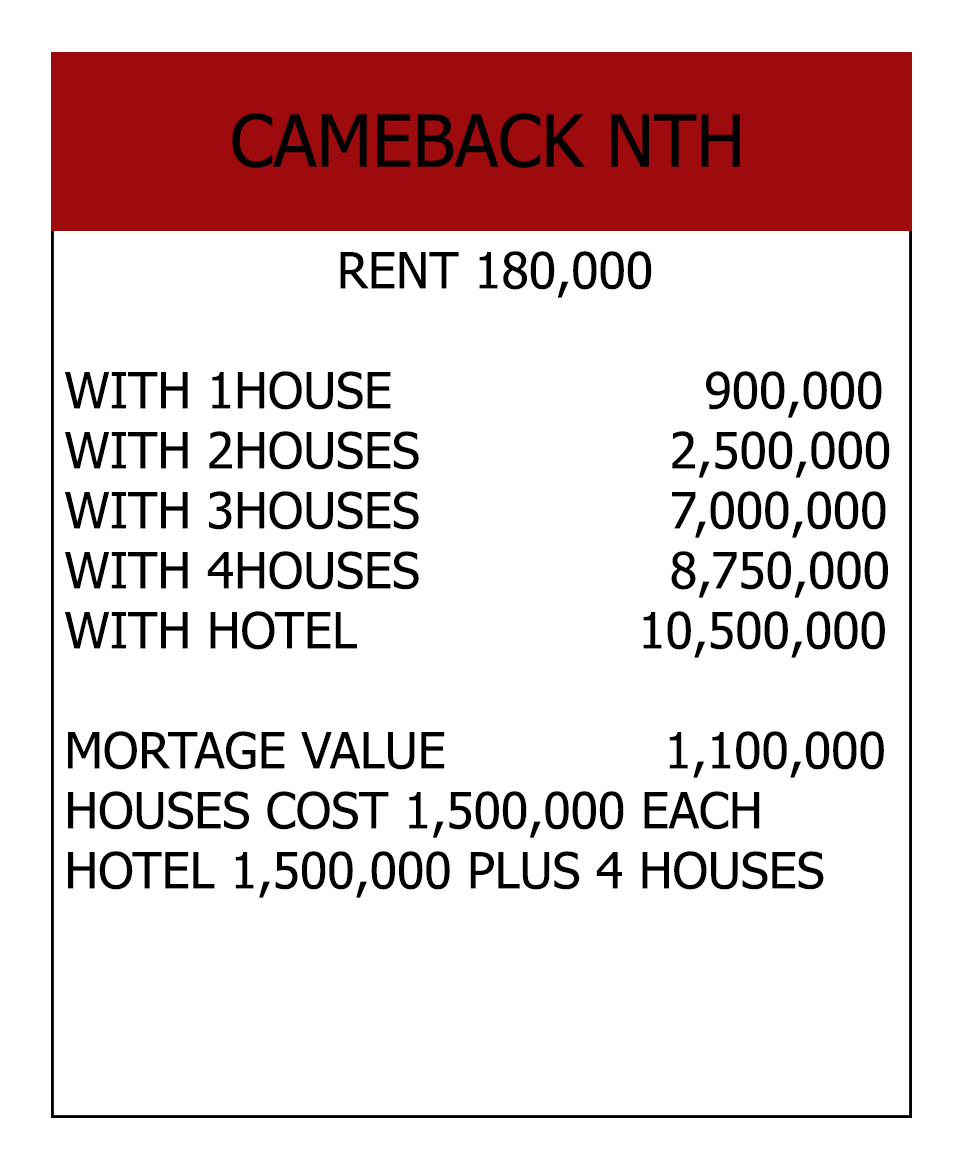
<style>
.page{position:relative;width:966px;height:1164px;background:#ffffff}
.page>*{position:absolute;margin:0}
.t1{font:72px "Tahoma";color:#000000}
.t2{font:50px "Tahoma";color:#010000}
</style>
<div class="page">
<p class="t1" style="left:232px;top:113px;width:508px;height:55px">CAMEBACK NTH</p>
<p class="t2" style="left:65px;top:251px;width:825px;height:647px;text-align:center">RENT 180,000<br><br>WITH 1HOUSE                    900,000<br>WITH 2HOUSES                2,500,000<br>WITH 3HOUSES                7,000,000<br>WITH 4HOUSES                8,750,000<br>WITH HOTEL                  10,500,000<br><br>MORTAGE VALUE              1,100,000<br>HOUSES COST 1,500,000 EACH<br>HOTEL 1,500,000 PLUS 4 HOUSES</p>
</div>
